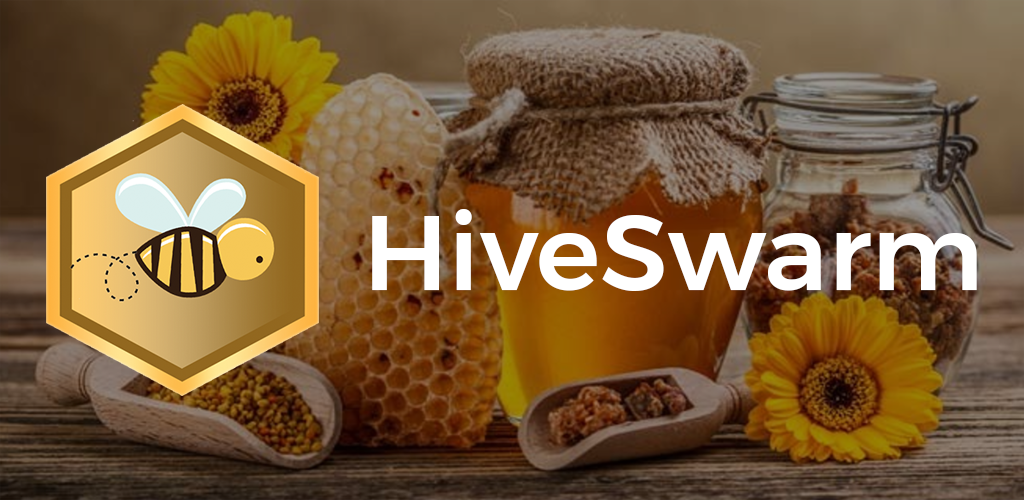
<style>
.page{position:relative;width:1024px;height:500px}
.page>*{position:absolute;margin:0}
.t1{font:104.9px "Montserrat-Medium";color:#ffffff;scale:1.03 1}
</style>
<div class="page">
<p class="t1" style="left:372px;top:209px;width:605px;height:82px">HiveSwarm</p>
</div>
